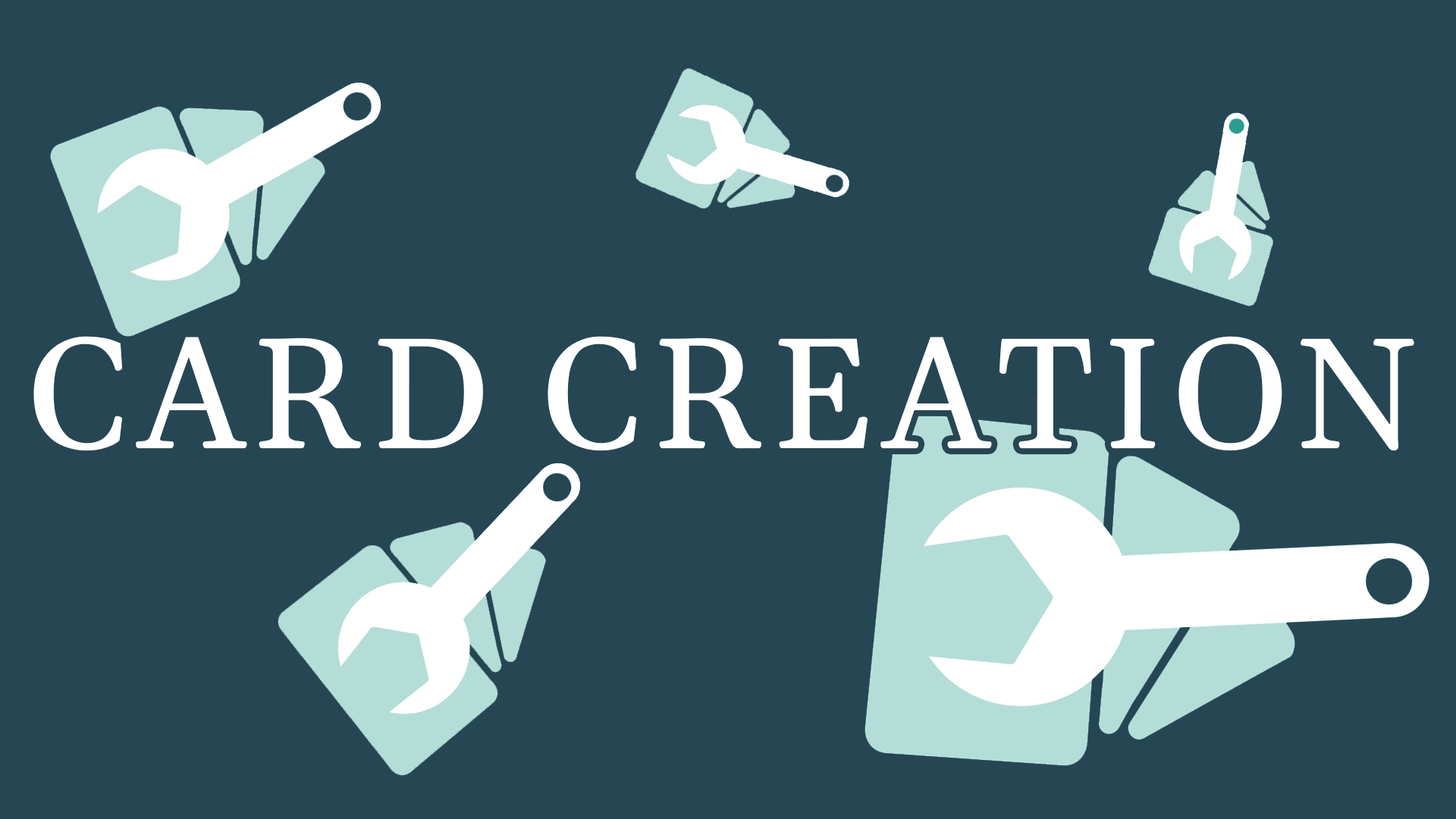
<style>
.page{position:relative;width:1456px;height:819px;background:#264653}
.page>*{position:absolute;margin:0}
.t1{font:158px "Gelasio-Regular";letter-spacing:0.05em;color:#ffffff}
</style>
<div class="page">
<p class="t1" style="left:33px;top:336px;width:1381px;height:115px">CARD CREATION</p>
</div>
